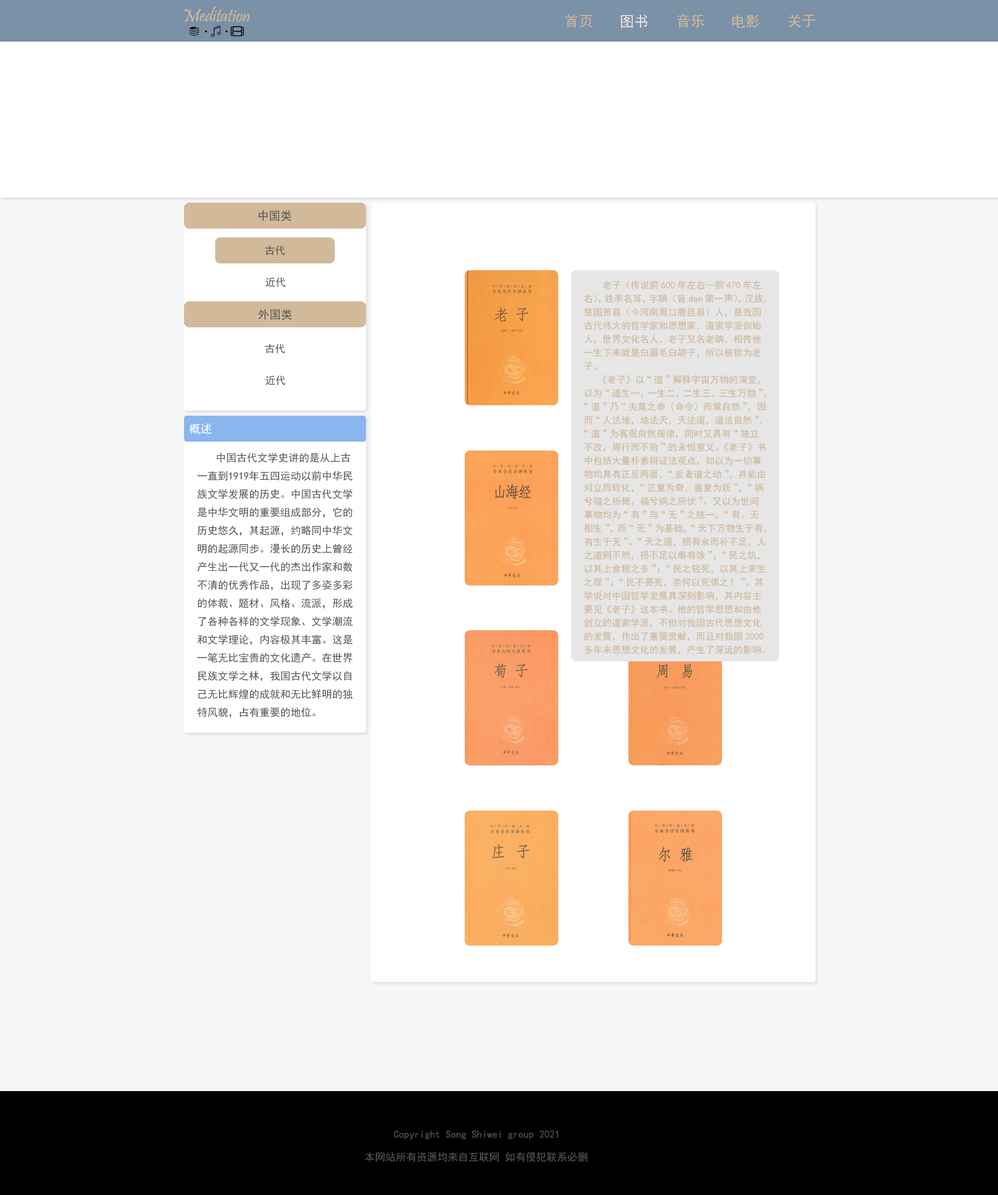
<style>
.page{position:relative;width:998px;height:1195px;background:#f5f6f7}
.page>*{position:absolute;margin:0}
.t1{font:18.7px "Pristina-Regular";color:#d7bb99}
.t2{font:14.5px "SimHei";color:#cfb89b}
.t3{font:14.5px "SimHei";color:#ece5e5}
.t4{font:14.5px "SimHei";color:#d2b99a}
.t5{font:11.4px "SimHei";color:#535353}
.t6{font:10.4px "SimHei";color:#535353}
.t7{font:9.4px/13.5px "SimHei";color:#cfb89b}
.t8{font:11.4px "SimHei";color:#ffffff}
</style>
<div class="page">
<p class="t1" style="left:183px;top:6px;width:67px;height:16px">Meditation</p>
<p class="t2" style="left:565px;top:14px;width:27px;height:14px">首页</p>
<p class="t3" style="left:620px;top:15px;width:27px;height:13px">图书</p>
<p class="t4" style="left:677px;top:14px;width:27px;height:14px">音乐</p>
<p class="t4" style="left:732px;top:15px;width:27px;height:13px">电影</p>
<p class="t4" style="left:788px;top:14px;width:27px;height:14px">关于</p>
<p class="t5" style="left:258px;top:210px;width:34px;height:11px">中国类</p>
<p class="t6" style="left:264px;top:245px;width:21px;height:11px">古代</p>
<p class="t6" style="left:265px;top:277px;width:20px;height:10px">近代</p>
<p class="t7" style="left:584px;top:281px;width:182px;height:374px">老子（传说前600年左右—前470年左右），姓李名耳，字聃（音dan第一声），汉族，楚国苦县（今河南周口鹿邑县）人，是我国古代伟大的哲学家和思想家，道家学派创始人，世界文化名人。老子又名老聃，相传他一生下来就是白眉毛白胡子，所以被称为老子。<br> 《老子》以“道”解释宇宙万物的演变，以为“道生一，一生二，二生三，三生万物”，“道”乃“夫莫之命（命令）而常自然”，因而“人法地，地法天，天法道，道法自然”。“道”为客观自然规律，同时又具有“独立不改，周行而不殆”的永恒意义。《老子》书中包括大量朴素辩证法观点，如以为一切事物均具有正反两面，“反者道之动”，并能由对立而转化，“正复为奇，善复为妖”，“祸兮福之所倚，福兮祸之所伏”。又以为世间事物均为“有”与“无”之统一，“有、无相生”，而“无”为基础，“天下万物生于有，有生于无”。“天之道，损有余而补不足，人之道则不然，损不足以奉有馀”；“民之饥，以其上食税之多”；“民之轻死，以其上求生之厚”；“民不畏死，奈何以死惧之？”。其学说对中国哲学发展具深刻影响，其内容主要见《老子》这本书。他的哲学思想和由他创立的道家学派，不但对我国古代思想文化的发展，作出了重要贡献，而且对我国2000多年来思想文化的发展，产生了深远的影响。</p>
<p class="t5" style="left:258px;top:309px;width:34px;height:11px">外国类</p>
<p class="t6" style="left:264px;top:343px;width:21px;height:11px">古代</p>
<p class="t6" style="left:265px;top:375px;width:20px;height:11px">近代</p>
<p class="t8" style="left:189px;top:423px;width:22px;height:11px">概述</p>
<p class="t6" style="left:197px;top:453px;width:156px;height:265px">中国古代文学史讲的是从上古<br>一直到1919年五四运动以前中华民<br>族文学发展的历史。中国古代文学<br>是中华文明的重要组成部分，它的<br>历史悠久，其起源，约略同中华文<br>明的起源同步。漫长的历史上曾经<br>产生出一代又一代的杰出作家和数<br>不清的优秀作品，出现了多姿多彩<br>的体裁、题材、风格、流派，形成<br>了各种各样的文学现象、文学潮流<br>和文学理论，内容极其丰富。这是<br>一笔无比宝贵的文化遗产。在世界<br>民族文学之林，我国古代文学以自<br>己无比辉煌的成就和无比鲜明的独<br>特风貌，占有重要的地位。</p>
<p class="t6" style="left:393px;top:1130px;width:165px;height:10px">Copyright Song Shiwei group 2021</p>
<p class="t6" style="left:365px;top:1152px;width:223px;height:10px">本网站所有资源均来自互联网 如有侵犯联系必删</p>
</div>
